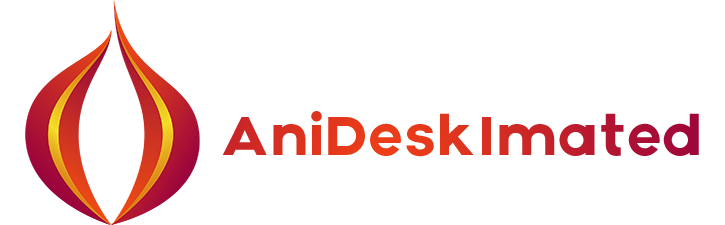
<style>
.page{position:relative;width:725px;height:225px;background:#ffffff}
.page>*{position:absolute;margin:0}
.t1{font:58.3px "Axis"}
</style>
<div class="page">
<p class="t1" style="left:222px;top:111px;width:477px;height:46px">AniDeskImated</p>
</div>
